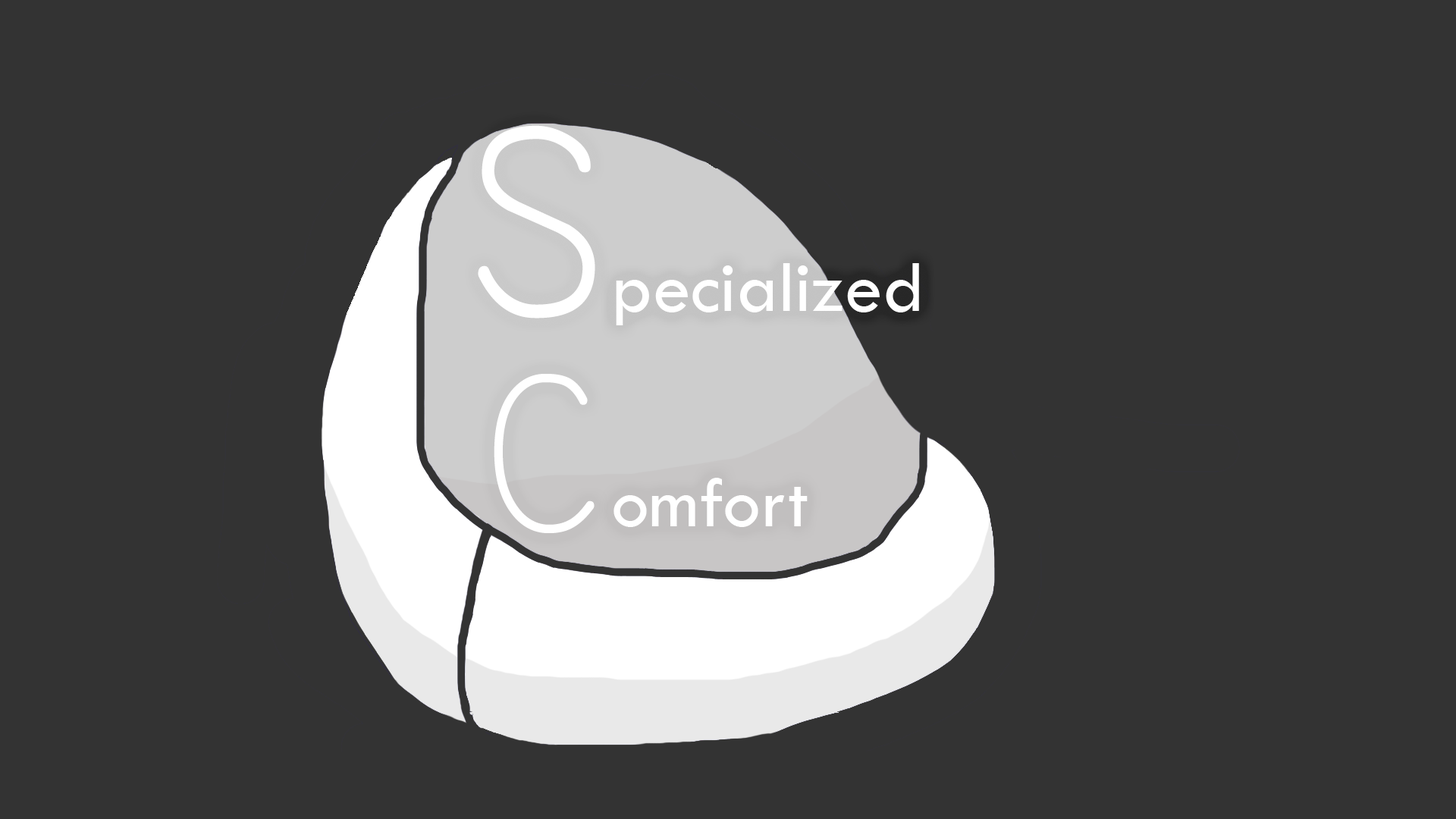
<style>
.page{position:relative;width:1456px;height:819px;background:#333333}
.page>*{position:absolute;margin:0}
.t1{font:333.6px "TechnicLite";color:#ffffff;scale:0.91 1}
.t2{font:75.8px "TwCenMT-Regular";color:#ffffff}
.t3{font:227.5px "TechnicLite";color:#ffffff;scale:0.91 1}
</style>
<div class="page">
<p class="t1" style="left:478px;top:125px;width:117px;height:193px;rotate:1deg">s</p>
<p class="t2" style="left:616px;top:263px;width:303px;height:62px">pecialized</p>
<p class="t3" style="left:494px;top:374px;width:101px;height:159px">C</p>
<p class="t2" style="left:613px;top:478px;width:195px;height:49px">omfort</p>
</div>
